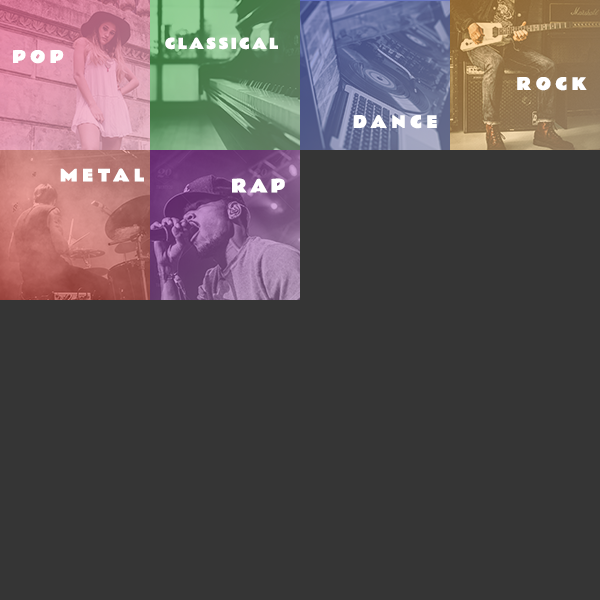
<style>
.page{position:relative;width:600px;height:600px;background:#353535}
.page>*{position:absolute;margin:0}
.t1{font:14px "RammettoOne-Regular";letter-spacing:0.175em;color:#ffffff}
.t2{font:16px "RammettoOne-Regular";letter-spacing:0.275em;color:#ffffff}
.t3{font:17px "RammettoOne-Regular";letter-spacing:0.175em;color:#ffffff}
</style>
<div class="page">
<p class="t1" style="left:165px;top:37px;width:113px;height:13px">CLASSICAL</p>
<p class="t2" style="left:13px;top:50px;width:51px;height:14px">POP</p>
<p class="t2" style="left:517px;top:77px;width:70px;height:14px">ROCK</p>
<p class="t2" style="left:353px;top:115px;width:84px;height:14px">DANCE</p>
<p class="t2" style="left:60px;top:168px;width:84px;height:14px">METAL</p>
<p class="t3" style="left:232px;top:178px;width:53px;height:15px">RAP</p>
</div>
